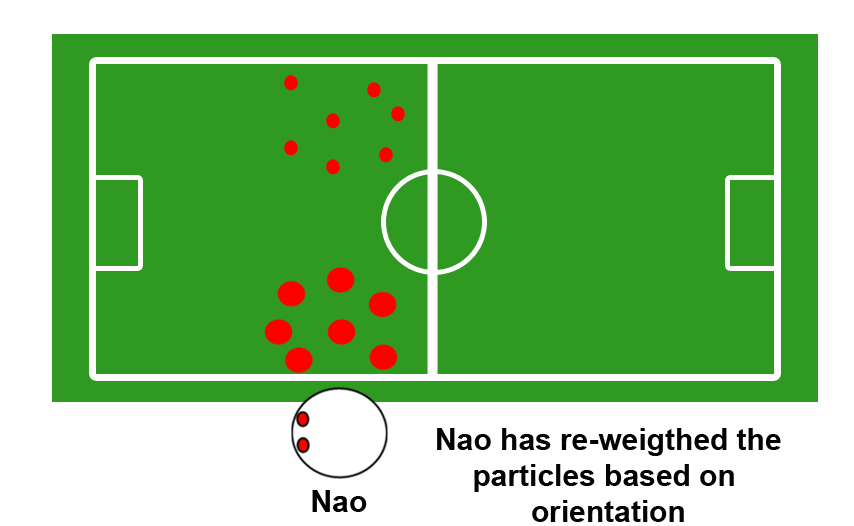
<style>
.page{position:relative;width:854px;height:526px;background:#309922}
.page>*{position:absolute;margin:0}
.t1{font:30px "Arial-BoldMT";color:#030303}
.t2{font:30px "Arial-BoldMT";color:#000000}
</style>
<div class="page">
<p class="t1" style="left:437px;top:428px;width:344px;height:94px;text-align:center">Nao has re-weigthed the<br>particles based on <br>orientation</p>
<p class="t2" style="left:312px;top:490px;width:55px;height:22px">Nao</p>
</div>
